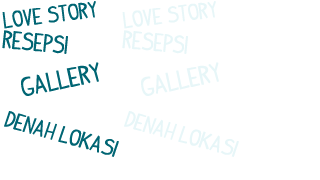
<style>
.page{position:relative;width:320px;height:180px;background:#ffffff}
.page>*{position:absolute;margin:0}
.t1{font:17.9px "IndyPimp";color:#006573;scale:1.08 1}
.t2{font:17.9px "IndyPimp";color:#e7f6f8;scale:1.08 1}
.t3{font:19.7px "IndyPimp";color:#006573}
.t4{font:19.7px "IndyPimp";color:#e7f6f8}
.t5{font:21px "IndyPimp";color:#006573;scale:1.09 1}
.t6{font:21px "IndyPimp";color:#e7f6f8;scale:1.09 1}
.t7{font:18.2px "IndyPimp";color:#006573;scale:1.11 1}
.t8{font:18.2px "IndyPimp";color:#e7f6f8;scale:1.11 1}
</style>
<div class="page">
<p class="t1" style="left:2px;top:1px;width:94px;height:28px;rotate:-7deg">love story</p>
<p class="t2" style="left:122px;top:1px;width:94px;height:28px;rotate:-7deg">love story</p>
<p class="t3" style="left:2px;top:30px;width:66px;height:24px;rotate:5deg">Resepsi</p>
<p class="t4" style="left:122px;top:30px;width:66px;height:24px;rotate:5deg">Resepsi</p>
<p class="t5" style="left:21px;top:62px;width:78px;height:34px;rotate:-12deg">Gallery</p>
<p class="t6" style="left:141px;top:62px;width:78px;height:34px;rotate:-12deg">Gallery</p>
<p class="t7" style="left:4px;top:111px;width:115px;height:46px;rotate:16deg">denah lokasi</p>
<p class="t8" style="left:124px;top:111px;width:115px;height:46px;rotate:16deg">denah lokasi</p>
</div>
